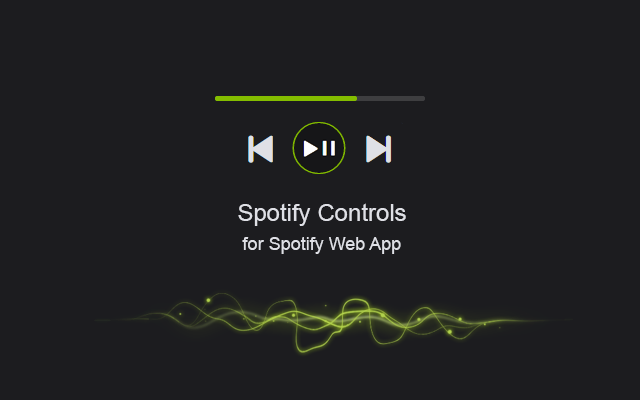
<style>
.page{position:relative;width:640px;height:400px;background:#1c1c1f}
.page>*{position:absolute;margin:0}
.t1{font:18px "ArialMT";color:#dfe0e6}
.t2{font:24px "ArialMT";color:#dfe0e6}
</style>
<div class="page">
<p class="t1" style="left:238px;top:203px;width:168px;height:51px;text-align:center"><span class="t2">Spotify Controls<br> <br></span>for Spotify Web App</p>
</div>
